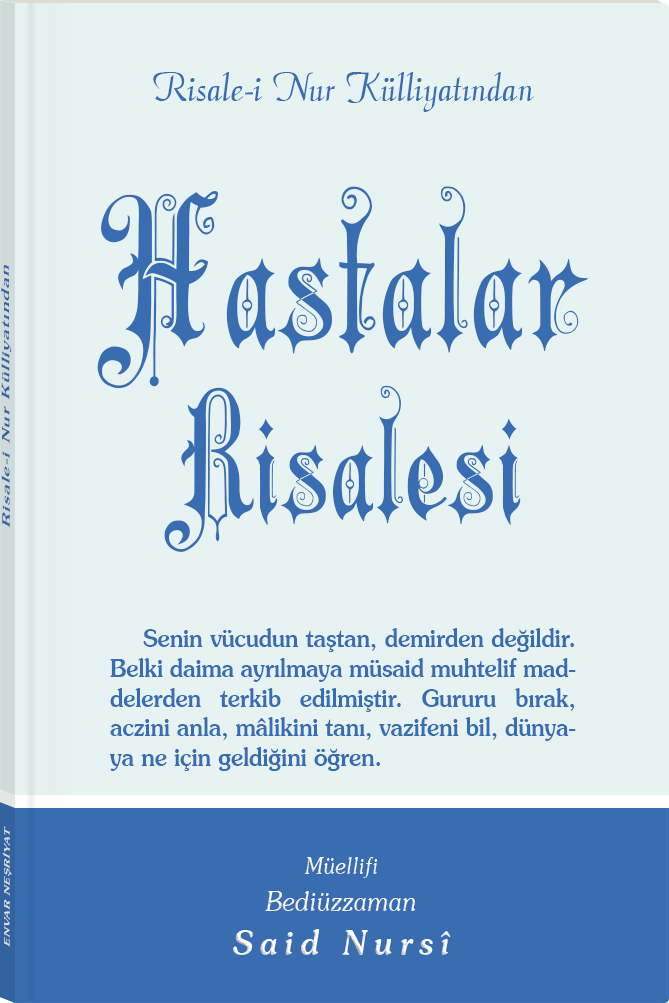
<style>
.page{position:relative;width:669px;height:1003px;background:#e7f3f3}
.page>*{position:absolute;margin:0}
.t1{font:45.3px "Barla © 072 Aria ScriptScriptSSi";color:#386db2;scale:0.94 1}
.t2{font:203.8px/181.8px "Barla © 001 Liva Nur";letter-spacing:-0.001em;color:#386db2;scale:0.93 1}
.t3{font:168.9px/171.4px "Barla © 001 Liva Nur";letter-spacing:-0.001em;color:#386db2;scale:0.93 1}
.t4{font:11.4px "Souvenir-Medium";letter-spacing:0.08em;color:#386db2;scale:1.65 1}
.t5{font:24.5px/29.7px "Souvenir-Medium";color:#386db2;scale:0.92 1}
.t6{font:8.3px "Souvenir-Medium";letter-spacing:0.08em;color:#e5e5e5;scale:1.43 1}
.t7{font:27.1px/37.8px "Souvenir-LightItalic";color:#ffffff;scale:0.92 1}
.t8{font:22.8px/39.8px "Souvenir-LightItalic";color:#ffffff;scale:0.92 1}
.t9{font:33.9px/43.8px "Souvenir-MediumItalic";letter-spacing:0.2em;color:#ffffff;scale:0.92 1}
</style>
<div class="page">
<p class="t1" style="left:153px;top:72px;width:381px;height:40px">Risale-i Nur Külliyatından</p>
<p class="t2" style="left:97px;top:186px;width:491px;height:366px;text-align:center">Hastalar<br><span class="t3">Risalesi</span></p>
<p class="t4" style="left:1px;top:265px;width:10px;height:263px;rotate:-90deg">Risale-i Nur Külliyatından</p>
<p class="t5" style="left:110px;top:628px;width:466px;height:143px;text-align:justify">Senin vücudun taştan, demirden değildir. Belki daima ayrılmaya müsaid muhtelif maddelerden terkib edilmiştir. Gururu bırak, aczini anla, mâlikini tanı, vazifeni bil, dünyaya ne için geldiğini öğren.</p>
<p class="t6" style="left:2px;top:826px;width:10px;height:121px;rotate:-90deg">ENVAR NEŞRİYAT</p>
<p class="t7" style="left:233px;top:857px;width:218px;height:98px;text-align:center"><span class="t8">Müellifi<br></span>Bediüzzaman<br><span class="t9">Said Nursî</span></p>
</div>
